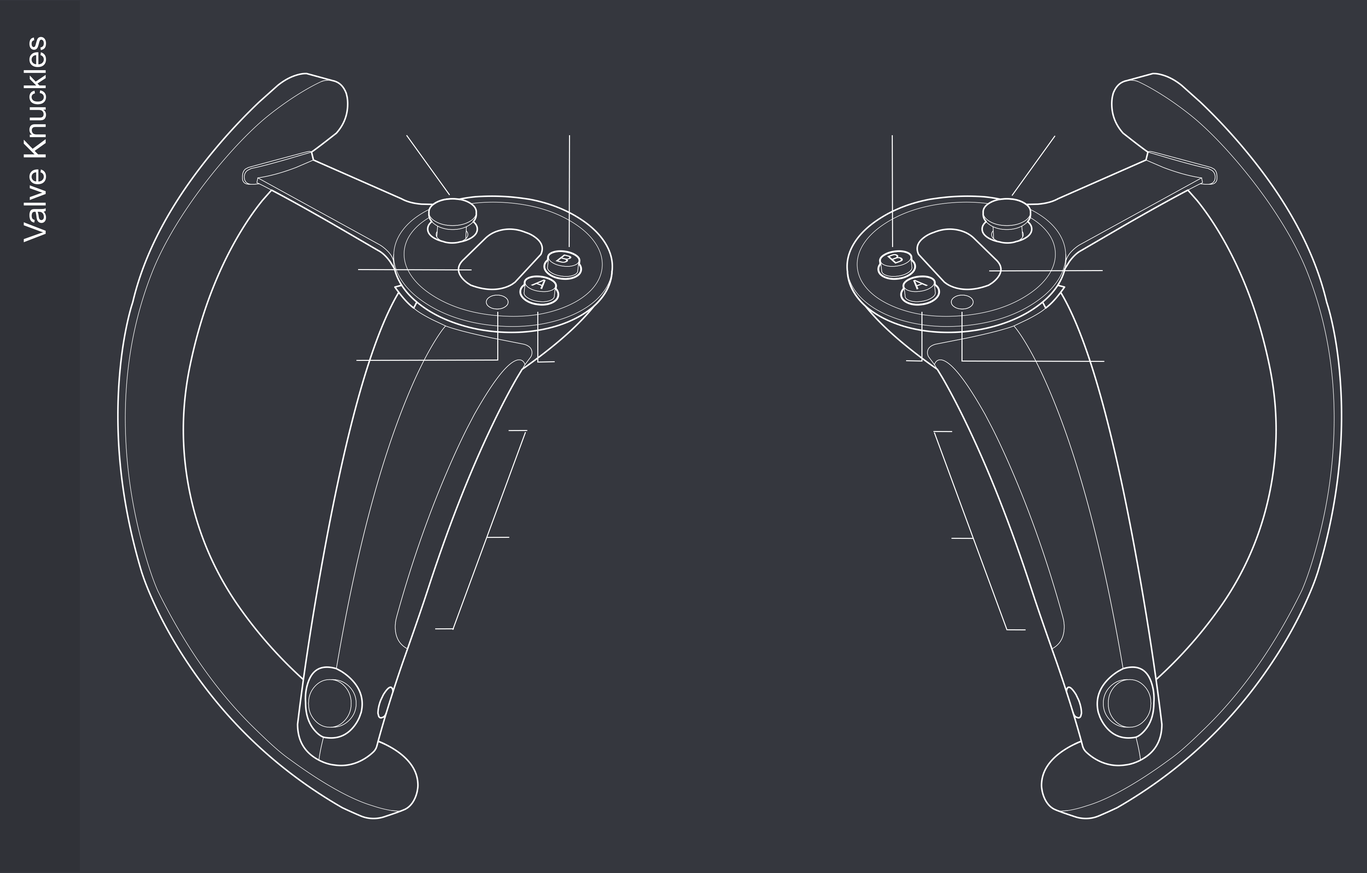
<style>
.page{position:relative;width:1367px;height:873px;background:#35373e}
.page>*{position:absolute;margin:0}
.t1{font:30.5px "ArialMT";color:#ffffff}
.t2{font:15.1px "ArialMT";color:#ffffff;scale:1.17 1}
.t3{font:15.3px "ArialMT";color:#ffffff;scale:1.17 1}
</style>
<div class="page">
<p class="t1" style="left:24px;top:37px;width:22px;height:205px;rotate:-90deg">Valve Knuckles</p>
<p class="t2" style="left:555px;top:254px;width:16px;height:9px;rotate:14deg">B</p>
<p class="t3" style="left:887px;top:254px;width:16px;height:10px;rotate:-20deg">B</p>
<p class="t3" style="left:531px;top:279px;width:15px;height:10px;rotate:-160deg">A</p>
<p class="t3" style="left:913px;top:280px;width:15px;height:9px;rotate:-20deg">A</p>
</div>
